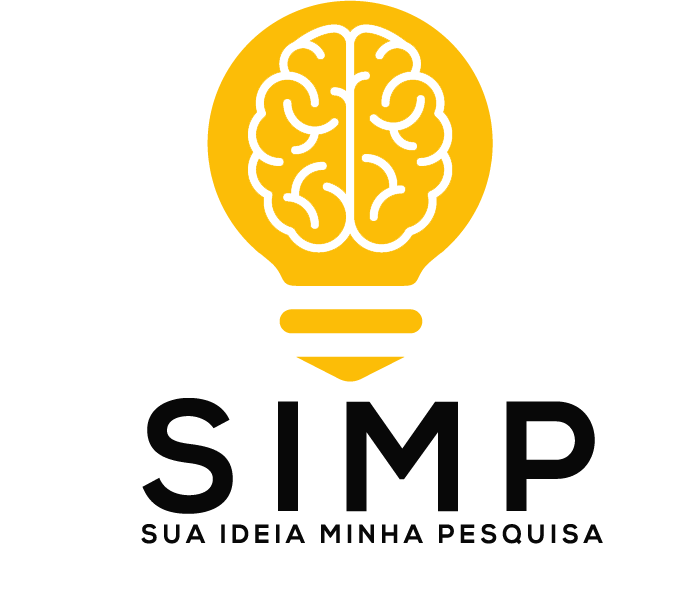
<style>
.page{position:relative;width:700px;height:600px;background:#ffffff}
.page>*{position:absolute;margin:0}
.t1{font:155.9px "NexaBold";letter-spacing:0.2em;color:#080808;scale:0.96 1}
.t2{font:26.1px "NexaBold";letter-spacing:0.2em;color:#080808;scale:0.96 1}
</style>
<div class="page">
<p class="t1" style="left:142px;top:398px;width:453px;height:116px">SIMP</p>
<p class="t2" style="left:141px;top:524px;width:462px;height:21px">SUA IDEIA MINHA PESQUISA</p>
</div>
